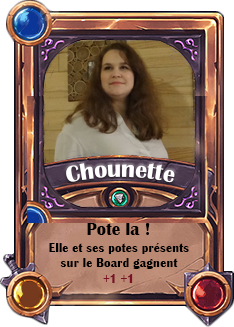
<style>
.page{position:relative;width:234px;height:327px}
.page>*{position:absolute;margin:0}
.t1{font:24px "BritannicBold";color:#ffffff;scale:0.96 1}
.t2{font:18px "BritannicBold";color:#000000;scale:0.96 1}
.t3{font:13px "BritannicBold";color:#000000;scale:0.96 1}
.t4{font:13px "BritannicBold";color:#7a1127;scale:0.96 1}
</style>
<div class="page">
<p class="t1" style="left:66px;top:163px;width:109px;height:20px">Chounette</p>
<p class="t2" style="left:87px;top:223px;width:63px;height:12px">Pote la !</p>
<p class="t3" style="left:49px;top:243px;width:140px;height:40px;text-align:center">Elle et ses potes présents<br>sur le Board gagnent<br><span class="t4">+1 +1</span></p>
</div>
